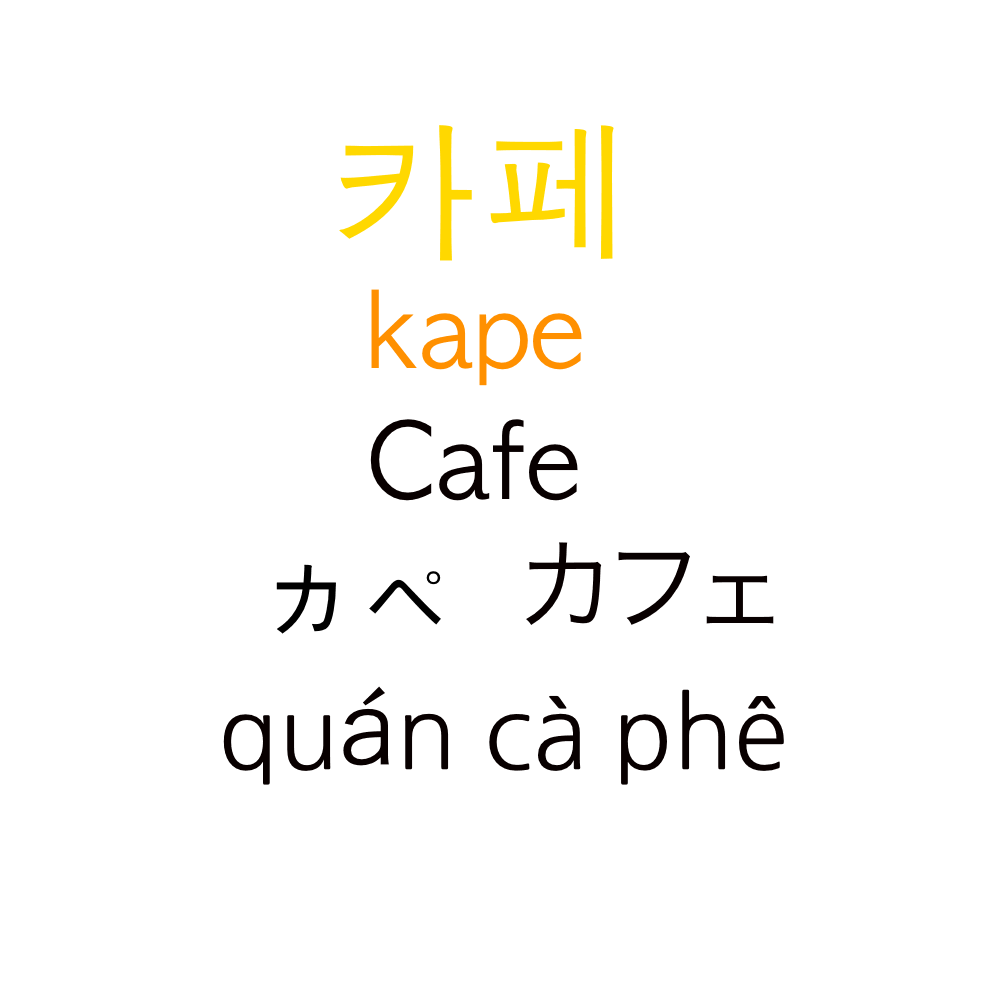
<style>
.page{position:relative;width:1000px;height:1000px;background:#ffffff}
.page>*{position:absolute;margin:0}
.t1{font:150px "AppleGothic";color:#ffd800}
.t2{font:100px "AppleGothic";color:#ff9000}
.t3{font:100px "AppleGothic";color:#080000}
.t4{font:100px "HiraKakuProN-W3";color:#080000}
.t5{font:100px "AppleGothic";color:#000000}
.t6{font:100px "NanumGothic";color:#080000}
</style>
<div class="page">
<p class="t1" style="left:339px;top:125px;width:275px;height:136px">카페</p>
<p class="t2" style="left:371px;top:289px;width:211px;height:97px">kape</p>
<p class="t3" style="left:370px;top:419px;width:208px;height:82px">Cafe</p>
<p class="t4" style="left:526px;top:542px;width:248px;height:83px">カフェ</p>
<p class="t5" style="left:276px;top:564px;width:165px;height:70px">カペ</p>
<p class="t6" style="left:223px;top:686px;width:561px;height:99px">qu<span class="t4">á</span>n cà phê</p>
</div>
